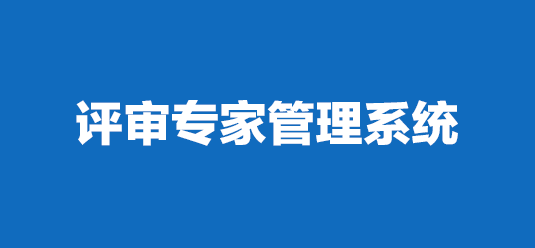
<style>
.page{position:relative;width:535px;height:248px;background:#106bbe}
.page>*{position:absolute;margin:0}
.t1{font:48px "FZLTTHK--GBK1-0";color:#ffffff}
</style>
<div class="page">
<p class="t1" style="left:76px;top:100px;width:382px;height:46px">评审专家管理系统</p>
</div>
